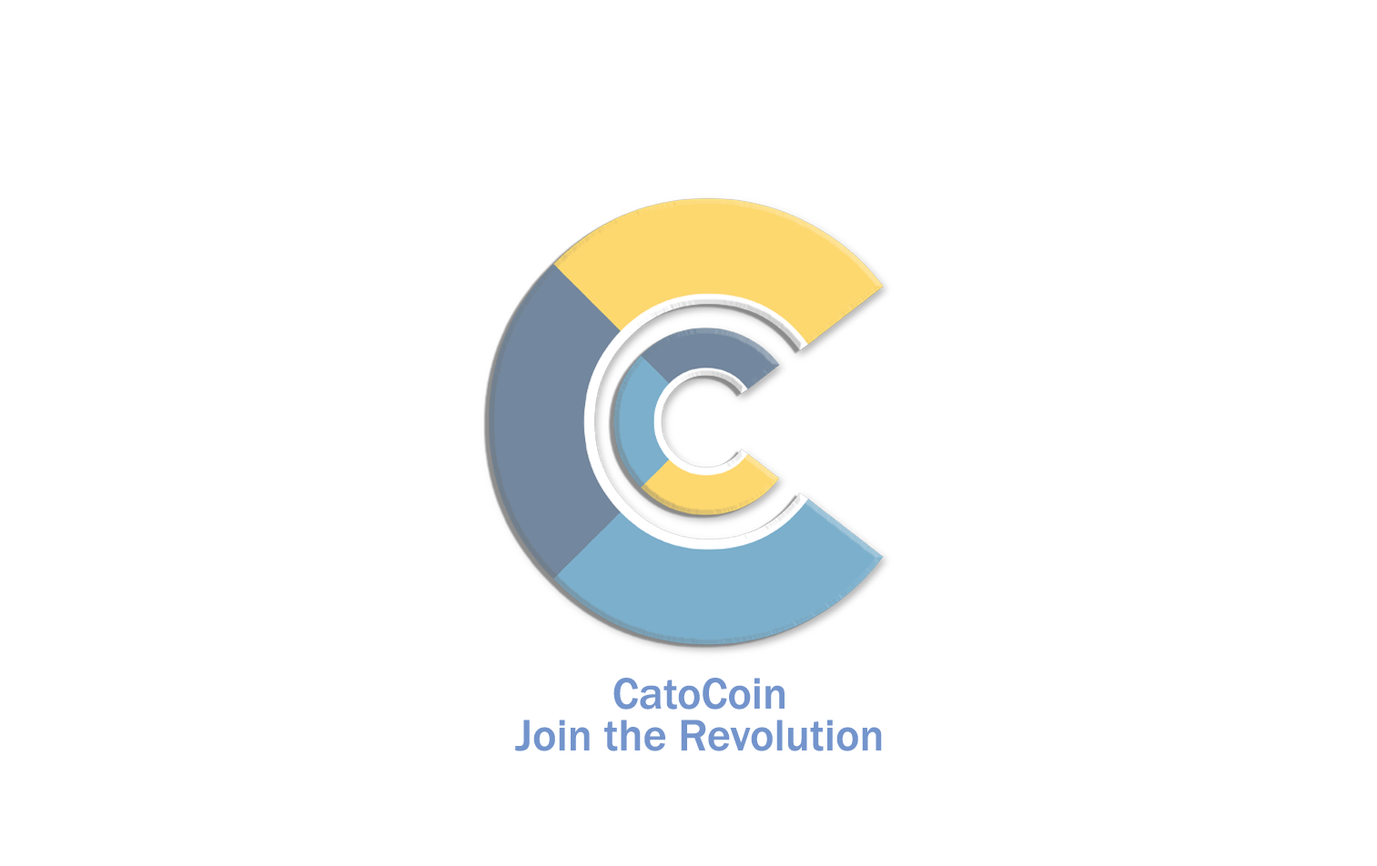
<style>
.page{position:relative;width:1377px;height:866px;background:#ffffff}
.page>*{position:absolute;margin:0}
.t1{font:45.5px/41.7px "FranklinGothic-Medium";color:#7394cc}
</style>
<div class="page">
<p class="t1" style="left:515px;top:678px;width:367px;height:74px;text-align:center">CatoCoin<br>Join the Revolution</p>
</div>
